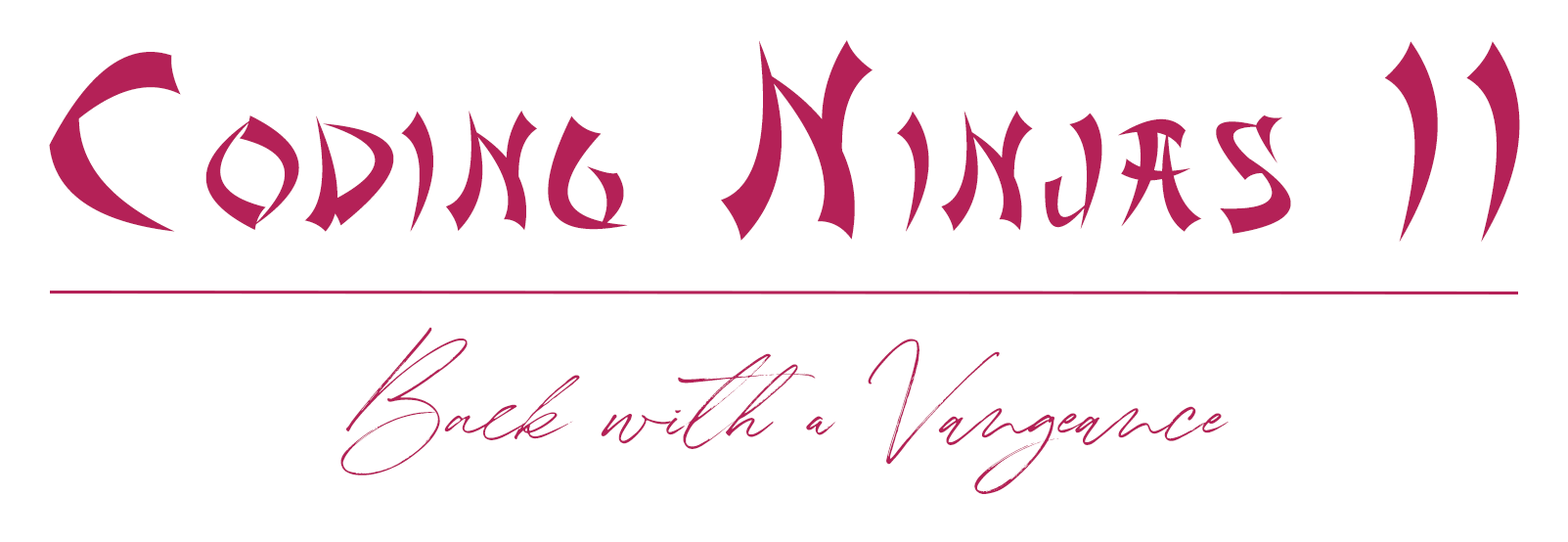
<style>
.page{position:relative;width:1568px;height:542px;background:#ffffff}
.page>*{position:absolute;margin:0}
.t1{font:146.7px "AsianDelight";letter-spacing:0.1em;color:#b42157;scale:0.93 1}
.t2{font:244.5px "AsianDelight";letter-spacing:0.1em;color:#b42157;scale:0.93 1}
.t3{font:58.7px "Winterlady";color:#b42157}
</style>
<div class="page">
<p class="t1" style="left:49px;top:40px;width:1471px;height:202px"><span class="t2">C</span>ODING<span class="t2"> N</span>INJAS<span class="t2"> II</span></p>
<p class="t3" style="left:340px;top:327px;width:889px;height:167px;text-align:center">Back with a Vangeance</p>
</div>
